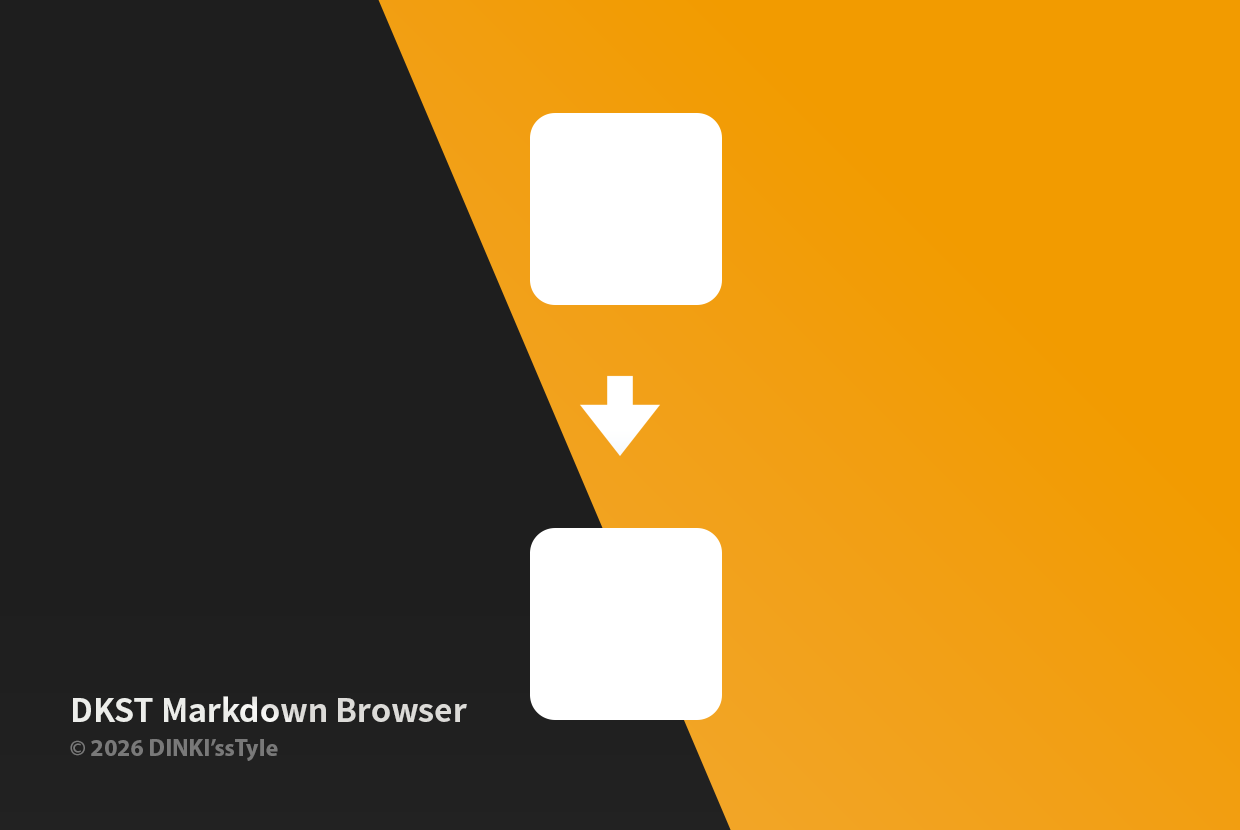
<style>
.page{position:relative;width:1240px;height:830px;background:#1e1e1e}
.page>*{position:absolute;margin:0}
.t1{font:32.1px "NotoSansCJKkr-Bold";color:#ecedea}
.t2{font:24px "MyriadPro-Bold";color:#797979}
</style>
<div class="page">
<p class="t1" style="left:73px;top:696px;width:394px;height:26px">DKST Markdown Browser</p>
<p class="t2" style="left:70px;top:739px;width:208px;height:22px">© 2026 DINKI’ssTyle</p>
</div>
